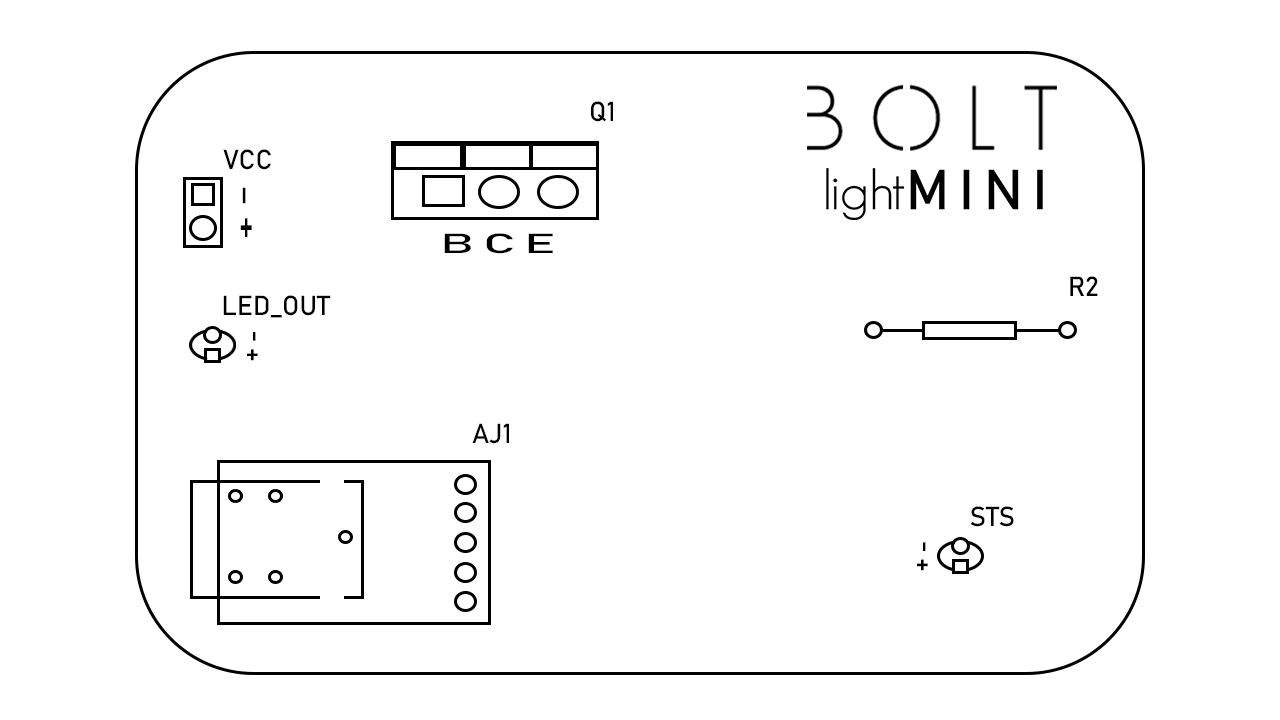
<style>
.page{position:relative;width:1280px;height:720px;background:#ffffff}
.page>*{position:absolute;margin:0}
.t1{font:27.2px "Bahnschrift";color:#000000}
.t2{font:28.1px "Bahnschrift";color:#000000;scale:1.69 1}
.t3{font:27.2px "Bahnschrift";color:#000000;scale:1.94 1}
</style>
<div class="page">
<p class="t1" style="left:591px;top:101px;width:22px;height:21px">Q1</p>
<p class="t1" style="left:223px;top:149px;width:48px;height:21px">VCC</p>
<p class="t2" style="left:240px;top:187px;width:12px;height:50px;rotate:90deg">- +</p>
<p class="t3" style="left:444px;top:233px;width:109px;height:21px">B C E</p>
<p class="t1" style="left:1070px;top:276px;width:28px;height:20px">R2</p>
<p class="t1" style="left:223px;top:295px;width:108px;height:23px">LED_OUT</p>
<p class="t1" style="left:247px;top:332px;width:11px;height:29px;rotate:-90deg">+ -</p>
<p class="t1" style="left:472px;top:423px;width:37px;height:21px">AJ1</p>
<p class="t1" style="left:970px;top:506px;width:44px;height:21px">STS</p>
<p class="t1" style="left:917px;top:542px;width:11px;height:29px;rotate:-90deg">+ -</p>
</div>
